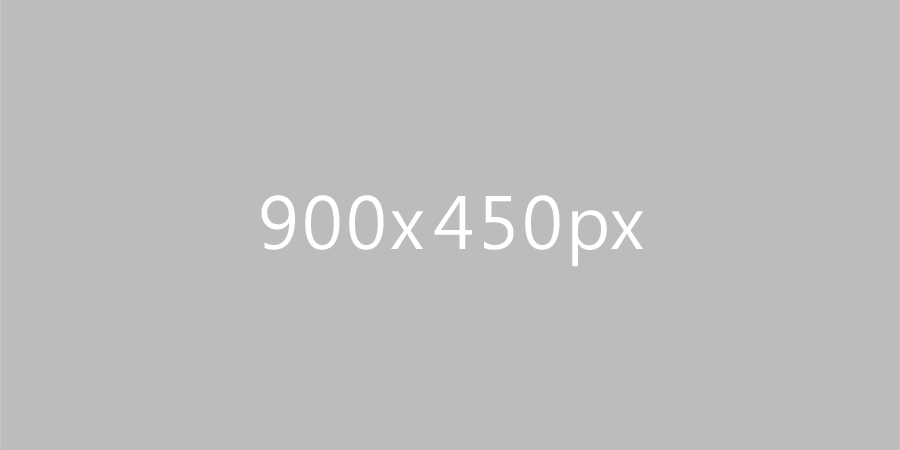
<style>
.page{position:relative;width:900px;height:450px;background:#bcbcbc}
.page>*{position:absolute;margin:0}
.t1{font:70px "MicrosoftJhengHeiRegular";letter-spacing:0.05em;color:#ffffff}
</style>
<div class="page">
<p class="t1" style="left:261px;top:195px;width:383px;height:72px">900x450px</p>
</div>
